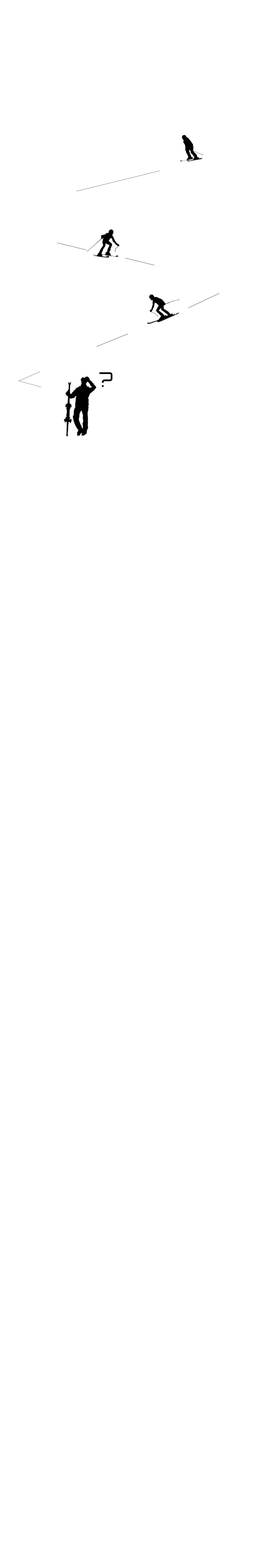
<style>
.page{position:relative;width:271px;height:1568px;background:#ffffff}
.page>*{position:absolute;margin:0}
.t1{font:20.3px "Orbitron-Regular";color:#000000}
</style>
<div class="page">
<p class="t1" style="left:99px;top:372px;width:14px;height:15px">?</p>
</div>
